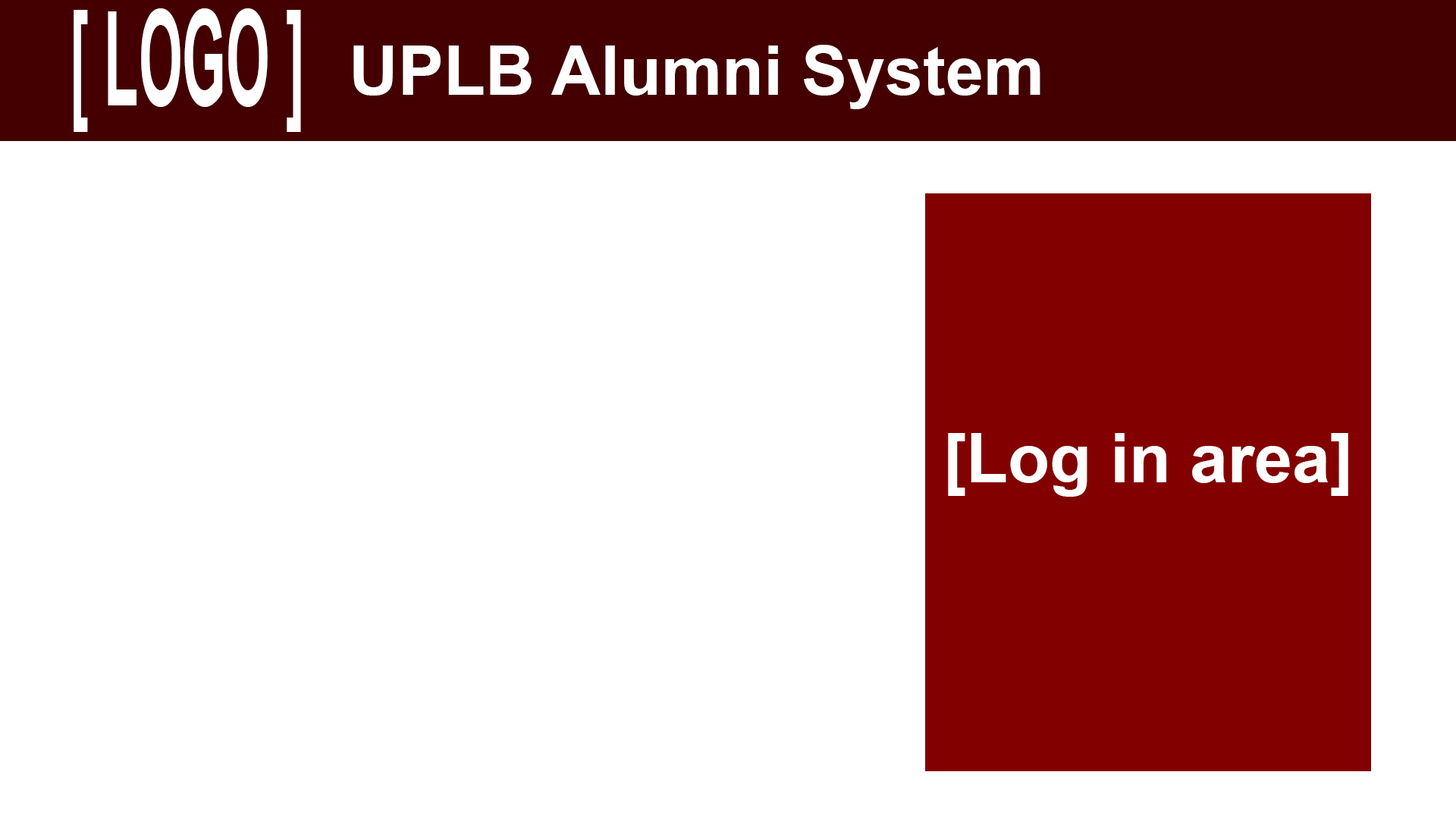
<style>
.page{position:relative;width:1456px;height:819px;background:#ffffff}
.page>*{position:absolute;margin:0}
.t1{font:132.9px "Arial-BoldMT";color:#fffefe;scale:0.42 1}
.t2{font:68.2px "Arial-BoldMT";color:#fffefe}
.t3{font:68.2px "Arial-BoldMT";color:#ffffff}
</style>
<div class="page">
<p class="t1" style="left:74px;top:8px;width:227px;height:124px">[ LOGO ]</p>
<p class="t2" style="left:353px;top:45px;width:687px;height:64px">UPLB Alumni System</p>
<p class="t3" style="left:948px;top:433px;width:400px;height:64px">[Log in area]</p>
</div>
